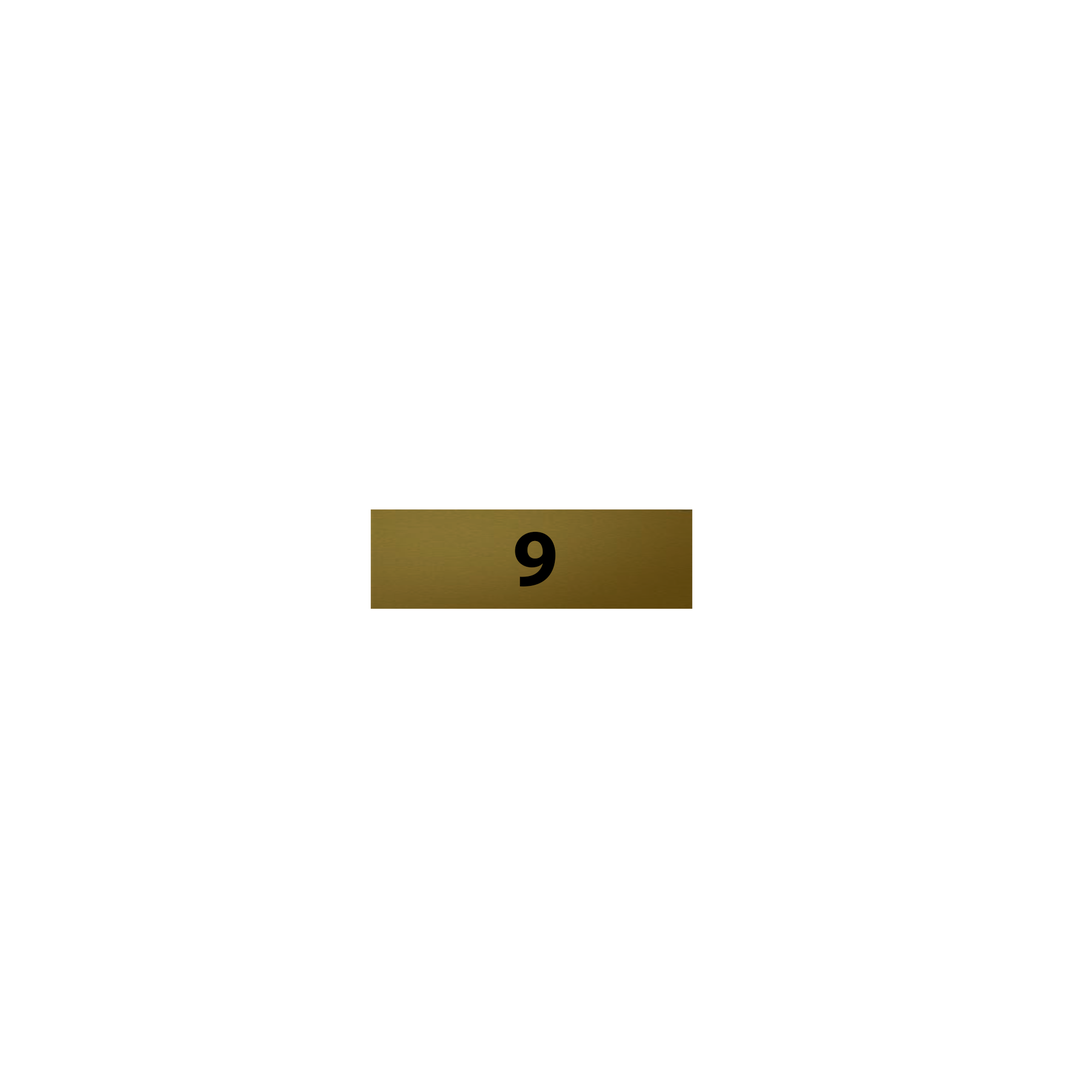
<style>
.page{position:relative;width:1092px;height:1092px;background:#ffffff}
.page>*{position:absolute;margin:0}
.t1{font:81.9px "MyriadPro-Bold";color:#000000}
</style>
<div class="page">
<p class="t1" style="left:515px;top:531px;width:41px;height:56px">9</p>
</div>
